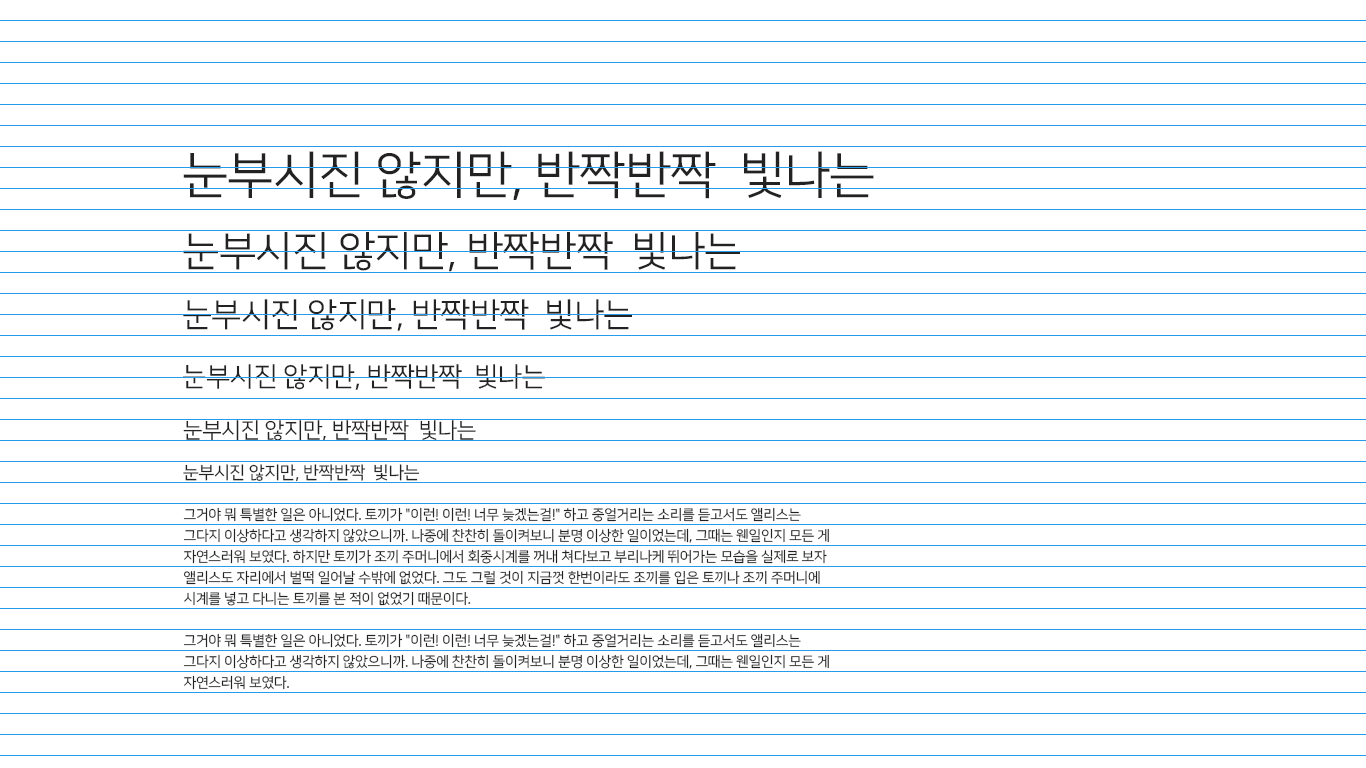
<style>
.page{position:relative;width:1366px;height:768px;background:#ffffff}
.page>*{position:absolute;margin:0}
.t1{font:50.9px "NanumSquareR";letter-spacing:-0.02em;color:#222222}
.t2{font:41.1px "NanumSquareR";letter-spacing:-0.02em;color:#222222}
.t3{font:33.1px "NanumSquareR";letter-spacing:-0.02em;color:#222222}
.t4{font:26.7px "NanumSquareR";letter-spacing:-0.02em;color:#222222}
.t5{font:21.5px "NanumSquareR";letter-spacing:-0.02em;color:#222222}
.t6{font:17.4px "NanumSquareR";letter-spacing:-0.02em;color:#222222}
.t7{font:14px "NanumSquareR";letter-spacing:-0.02em;color:#222222}
</style>
<div class="page">
<p class="t1" style="left:183px;top:151px;width:691px;height:49px">눈부시진 않지만, 반짝반짝  빛나는</p>
<p class="t2" style="left:183px;top:232px;width:557px;height:40px">눈부시진 않지만, 반짝반짝  빛나는</p>
<p class="t3" style="left:183px;top:299px;width:449px;height:32px">눈부시진 않지만, 반짝반짝  빛나는</p>
<p class="t4" style="left:182px;top:364px;width:363px;height:26px">눈부시진 않지만, 반짝반짝  빛나는</p>
<p class="t5" style="left:183px;top:420px;width:293px;height:21px">눈부시진 않지만, 반짝반짝  빛나는</p>
<p class="t6" style="left:183px;top:464px;width:237px;height:18px">눈부시진 않지만, 반짝반짝  빛나는</p>
<p class="t7" style="left:183px;top:507px;width:646px;height:183px">그거야 뭐 특별한 일은 아니었다. 토끼가 "이런! 이런! 너무 늦겠는걸!" 하고 중얼거리는 소리를 듣고서도 앨리스는 그다지 이상하다고 생각하지 않았으니까. 나중에 찬찬히 돌이켜보니 분명 이상한 일이었는데, 그때는 웬일인지 모든 게 자연스러워 보였다. 하지만 토끼가 조끼 주머니에서 회중시계를 꺼내 쳐다보고 부리나케 뛰어가는 모습을 실제로 보자 앨리스도 자리에서 벌떡 일어날 수밖에 없었다. 그도 그럴 것이 지금껏 한번이라도 조끼를 입은 토끼나 조끼 주머니에 시계를 넣고 다니는 토끼를 본 적이 없었기 때문이다.<br>그거야 뭐 특별한 일은 아니었다. 토끼가 "이런! 이런! 너무 늦겠는걸!" 하고 중얼거리는 소리를 듣고서도 앨리스는 그다지 이상하다고 생각하지 않았으니까. 나중에 찬찬히 돌이켜보니 분명 이상한 일이었는데, 그때는 웬일인지 모든 게 자연스러워 보였다.</p>
</div>
